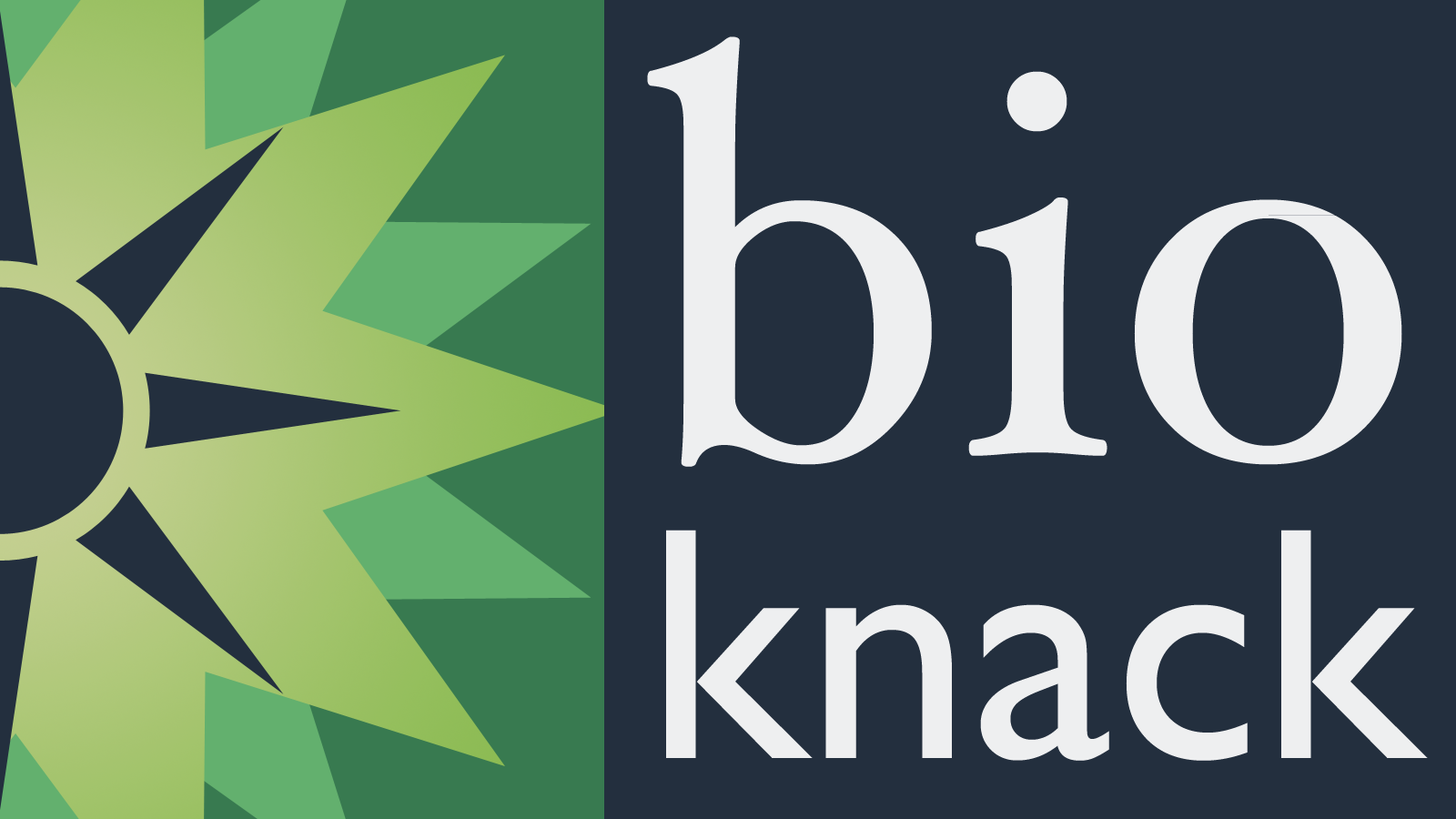
<style>
.page{position:relative;width:1456px;height:819px;background:#232f3e}
.page>*{position:absolute;margin:0}
.t1{font:572.5px "HoeflerText-Regular";color:#ffffff}
.t2{font:333.7px "GillSans";color:#ffffff}
</style>
<div class="page">
<p class="t1" style="left:647px;top:36px;width:755px;height:431px;opacity:0.92">bio</p>
<p class="t2" style="left:666px;top:530px;width:762px;height:231px;opacity:0.92">knack</p>
</div>
